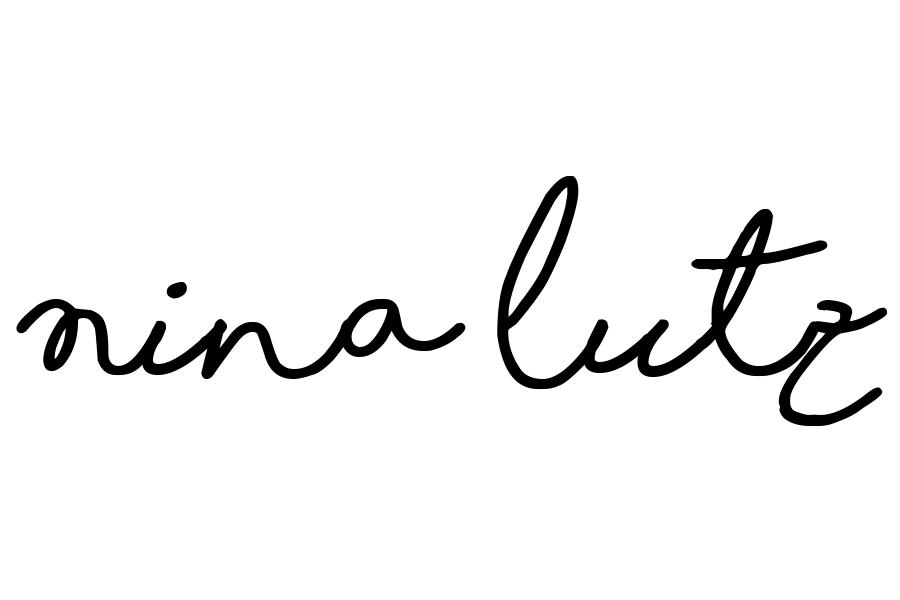
<style>
.page{position:relative;width:900px;height:600px;background:#ffffff}
.page>*{position:absolute;margin:0}
.t1{font:166.7px "ShorelinesScriptBold";color:#000000}
</style>
<div class="page">
<p class="t1" style="left:16px;top:176px;width:871px;height:250px">Nina Lutz</p>
</div>
